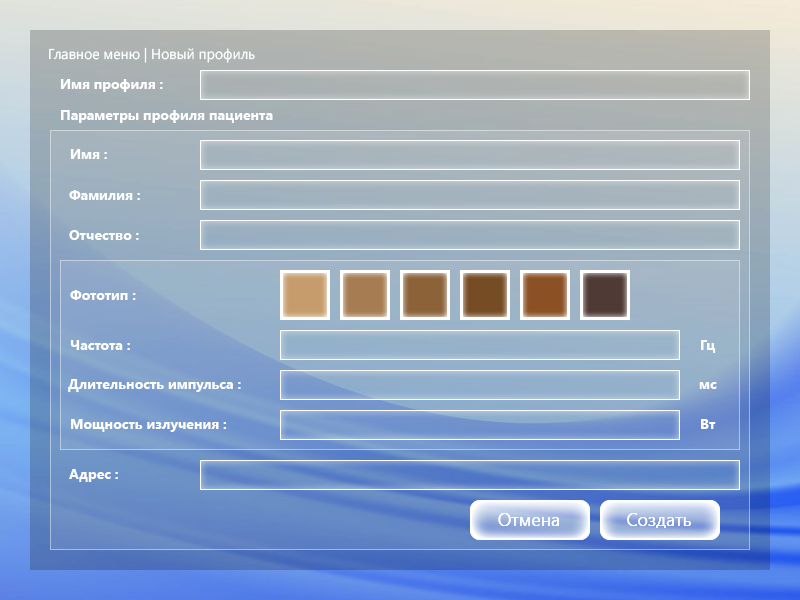
<style>
.page{position:relative;width:800px;height:600px}
.page>*{position:absolute;margin:0}
.t1{font:14.2px "SegoeUI";color:#ffffff}
.t2{font:14px "SegoeUI-Bold";color:#ffffff}
.t3{font:18px "SegoeUI";color:#ffffff}
</style>
<div class="page">
<p class="t1" style="left:49px;top:47px;width:206px;height:16px">Главное меню | Новый профиль</p>
<p class="t2" style="left:60px;top:79px;width:103px;height:13px">Имя профиля :</p>
<p class="t2" style="left:61px;top:110px;width:212px;height:13px">Параметры профиля пациента</p>
<p class="t2" style="left:70px;top:149px;width:37px;height:10px">Имя :</p>
<p class="t2" style="left:69px;top:190px;width:71px;height:10px">Фамилия :</p>
<p class="t2" style="left:69px;top:230px;width:70px;height:10px">Отчество :</p>
<p class="t2" style="left:70px;top:290px;width:66px;height:10px">Фототип :</p>
<p class="t2" style="left:70px;top:340px;width:60px;height:10px">Частота :</p>
<p class="t2" style="left:701px;top:340px;width:15px;height:13px">Гц</p>
<p class="t2" style="left:68px;top:379px;width:173px;height:13px">Длительность импульса :</p>
<p class="t2" style="left:699px;top:382px;width:18px;height:7px">мс</p>
<p class="t2" style="left:71px;top:419px;width:156px;height:13px">Мощность излучения :</p>
<p class="t2" style="left:701px;top:419px;width:15px;height:10px">Вт</p>
<p class="t2" style="left:69px;top:469px;width:49px;height:13px">Адрес :</p>
<p class="t3" style="left:498px;top:513px;width:61px;height:13px">Отмена</p>
<p class="t3" style="left:498px;top:513px;width:61px;height:13px">Отмена</p>
<p class="t3" style="left:627px;top:513px;width:64px;height:15px">Создать</p>
<p class="t3" style="left:627px;top:513px;width:64px;height:15px">Создать</p>
</div>
